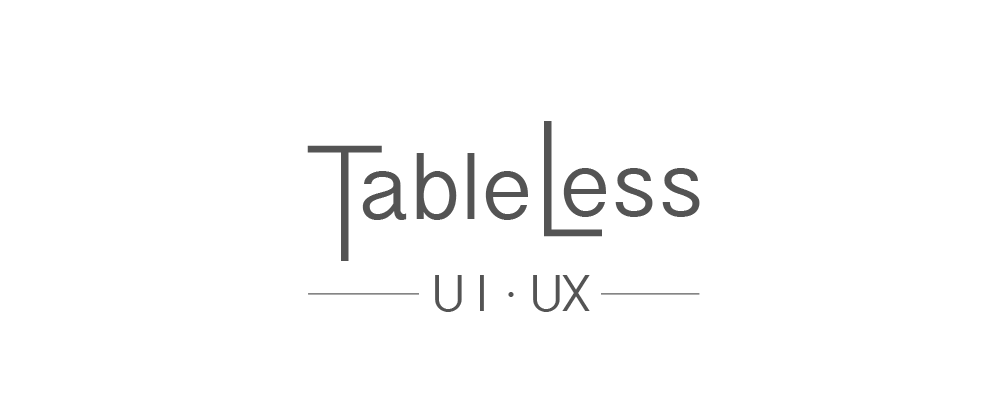
<style>
.page{position:relative;width:1000px;height:400px;background:#ffffff}
.page>*{position:absolute;margin:0}
.t1{font:94.2px "MyanmarSangamMN";color:#545454}
.t2{font:159.7px "LetterGothicStd";letter-spacing:-0.22em;color:#545454}
.t3{font:94.2px "MyanmarSangamMN";letter-spacing:-0.16em;color:#545454}
.t4{font:159.7px "LetterGothicStd";letter-spacing:-0.34em;color:#545454}
.t5{font:51.6px "MyanmarSangamMN";color:#545454}
.t6{font:51.6px "MyanmarSangamMN";letter-spacing:0.22em;color:#545454}
.t7{font:51.6px "MyanmarSangamMN";letter-spacing:0.06em;color:#545454}
.t8{font:23px "MyanmarSangamMN";color:#545454}
</style>
<div class="page">
<p class="t1" style="left:307px;top:121px;width:393px;height:140px"><span class="t2">T</span>abl<span class="t3">e</span><span class="t4">L</span>ess</p>
<p class="t5" style="left:435px;top:275px;width:155px;height:37px"><span class="t6">U</span><span class="t7">I </span><span class="t8">•</span> UX</p>
</div>
